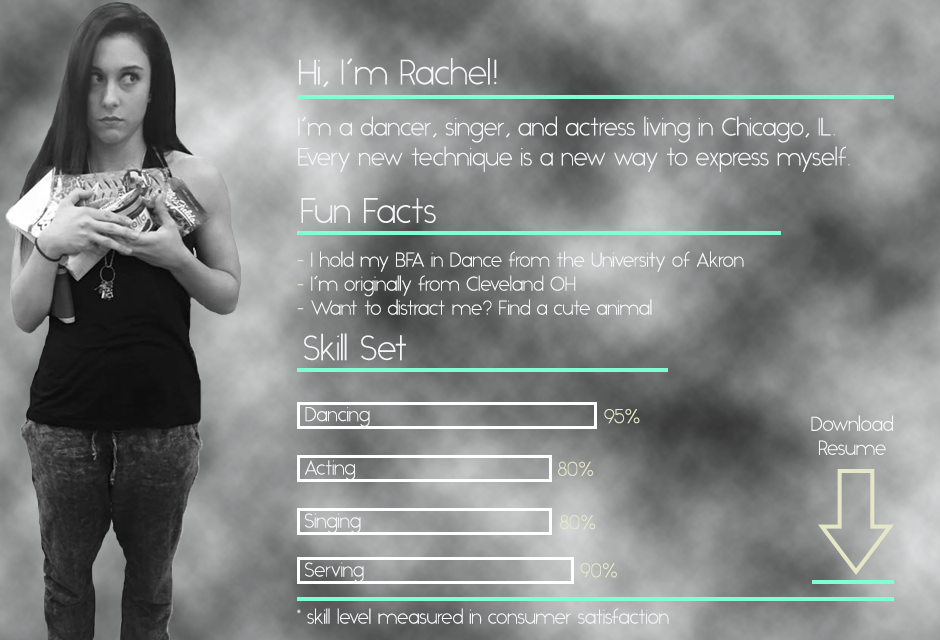
<style>
.page{position:relative;width:940px;height:640px}
.page>*{position:absolute;margin:0}
.t1{font:35px "Alcubierre";color:#f6f6f9}
.t2{font:25px "Alcubierre";color:#f6f6f9}
.t3{font:20px "Alcubierre";color:#f6f9f9}
.t4{font:20px "Alcubierre";color:#e6e7c7}
.t5{font:20px "Alcubierre";color:#f6f6f9}
</style>
<div class="page">
<p class="t1" style="left:299px;top:58px;width:198px;height:29px">Hi, I’m Rachel!</p>
<p class="t2" style="left:298px;top:116px;width:552px;height:56px">I’m a dancer, singer, and actress living in Chicago, IL.<br>Every new technique is a new way to express myself.</p>
<p class="t1" style="left:301px;top:198px;width:135px;height:25px">Fun Facts</p>
<p class="t3" style="left:297px;top:251px;width:447px;height:64px"><span class="t4">-</span> I hold my BFA in Dance from the University of Akron<br><span class="t4">-</span> I’m originally from Cleveland OH<br><span class="t4">-</span> Want to distract me? Find a cute animal</p>
<p class="t1" style="left:304px;top:333px;width:102px;height:28px">Skill Set</p>
<p class="t5" style="left:305px;top:407px;width:65px;height:20px">Dancing</p>
<p class="t4" style="left:604px;top:409px;width:36px;height:15px">95%</p>
<p class="t3" style="left:811px;top:415px;width:82px;height:40px;text-align:center">Download<br>Resume</p>
<p class="t5" style="left:305px;top:460px;width:50px;height:21px">Acting</p>
<p class="t4" style="left:558px;top:461px;width:36px;height:15px">80%</p>
<p class="t5" style="left:305px;top:513px;width:56px;height:21px">Singing</p>
<p class="t4" style="left:560px;top:515px;width:36px;height:15px">80%</p>
<p class="t5" style="left:305px;top:562px;width:59px;height:21px">Serving</p>
<p class="t4" style="left:580px;top:563px;width:37px;height:15px">90%</p>
<p class="t5" style="left:297px;top:608px;width:372px;height:16px"><span class="t4">*</span>skill level measured in consumer satisfaction</p>
</div>
